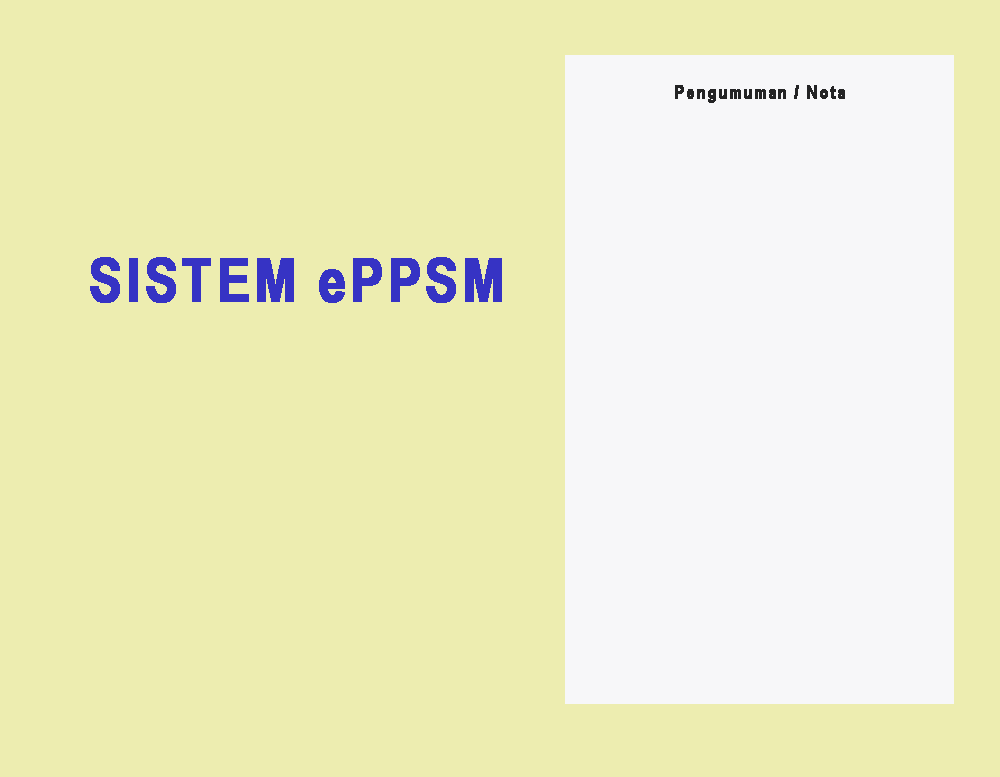
<style>
.page{position:relative;width:1000px;height:777px;background:#ededb0}
.page>*{position:absolute;margin:0}
.t1{font:18px "ArialNarrow-Bold";letter-spacing:0.05em;color:#242425;font-weight:bold}
.t2{font:60px "ArialNarrow-Bold";letter-spacing:0.05em;color:#3633c4;font-weight:bold}
</style>
<div class="page">
<p class="t1" style="left:675px;top:85px;width:170px;height:18px">Pengumuman / Nota</p>
<p class="t2" style="left:90px;top:257px;width:412px;height:46px">SISTEM ePPSM</p>
</div>
